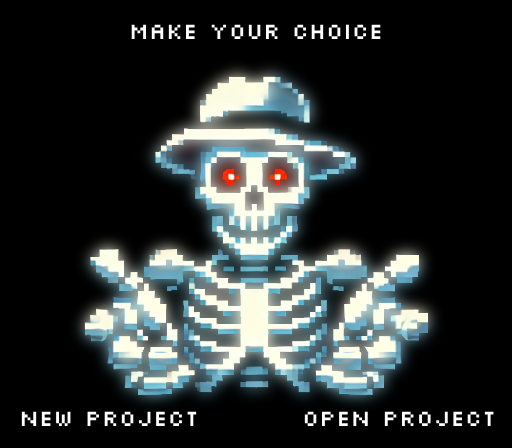
<style>
.page{position:relative;width:512px;height:448px;background:#000000}
.page>*{position:absolute;margin:0}
.t1{font:24px "Silkscreen";color:#ffffff}
</style>
<div class="page">
<p class="t1" style="left:131px;top:24px;width:250px;height:15px">MAKE YOUR CHOICE</p>
<p class="t1" style="left:21px;top:411px;width:176px;height:15px">NEW PROJECT</p>
<p class="t1" style="left:304px;top:411px;width:190px;height:15px">OPEN PROJECT</p>
</div>
